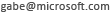
<style>
.page{position:relative;width:110px;height:14px;background:#ffffff}
.page>*{position:absolute;margin:0}
.t1{font:12px "Calibri";letter-spacing:0.025em;color:#4f4f4f}
</style>
<div class="page">
<p class="t1" style="left:1px;top:2px;width:109px;height:10px">gabe@microsoft.com</p>
</div>
